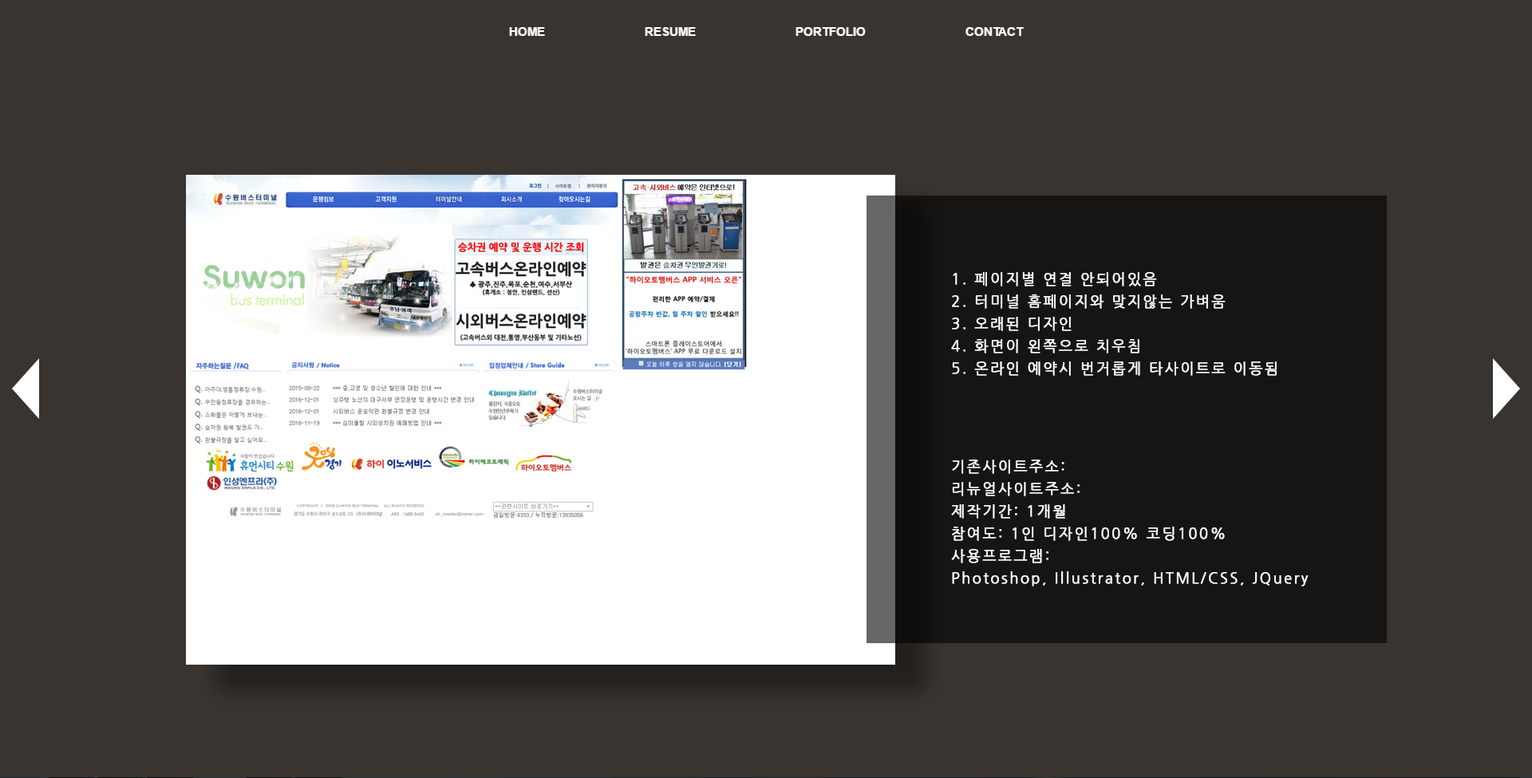
<style>
.page{position:relative;width:1532px;height:778px;background:#393430}
.page>*{position:absolute;margin:0}
.t1{font:14.4px/22.3px "NanumGothic";letter-spacing:0.12em;color:#ffffff;font-weight:bold}
</style>
<div class="page">
<p class="t1" style="left:951px;top:272px;width:326px;height:104px">1. 페이지별 연결 안되어있음<br>2. 터미널 홈페이지와 맞지않는 가벼움<br>3. 오래된 디자인<br>4. 화면이 왼쪽으로 치우침<br>5. 온라인 예약시 번거롭게 타사이트로 이동됨</p>
<p class="t1" style="left:951px;top:460px;width:358px;height:127px">기존사이트주소:<br>리뉴얼사이트주소:<br>제작기간: 1개월<br>참여도: 1인 디자인100% 코딩100%<br>사용프로그램:<br>Photoshop, Illustrator, HTML/CSS, JQuery</p>
</div>
